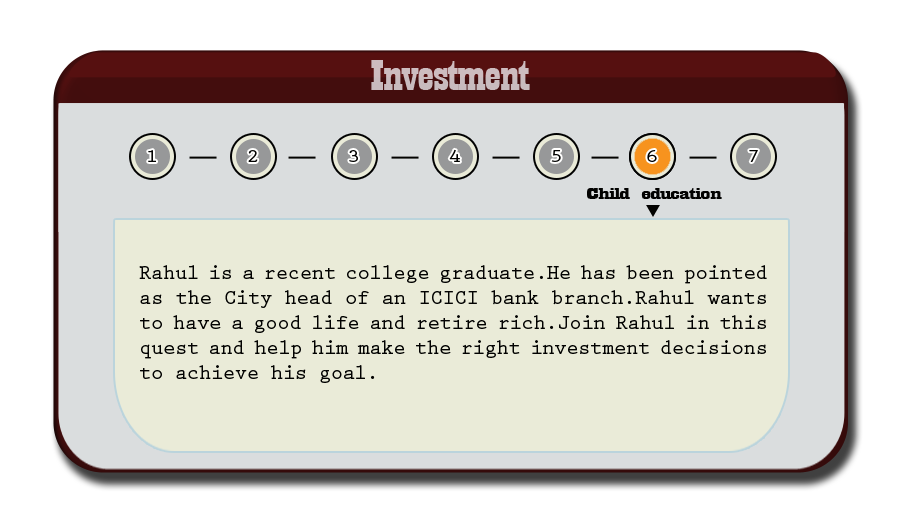
<style>
.page{position:relative;width:910px;height:512px;background:#eaebd8}
.page>*{position:absolute;margin:0}
.t1{font:44.6px "Playbill";letter-spacing:-0.025em;color:#c8bbbe;scale:1.61 1}
.t2{font:18.8px "PrestigeEliteStd-Bd";letter-spacing:-0.025em;color:#020201;scale:1.18 1}
.t3{font:17.3px "Playbill";letter-spacing:-0.025em;color:#020201;scale:2.47 1}
.t4{font:20.8px "PrestigeEliteStd-Bd";letter-spacing:-0.025em;color:#020201}
</style>
<div class="page">
<p class="t1" style="left:371px;top:60px;width:159px;height:30px">Investment</p>
<p class="t2" style="left:148px;top:150px;width:8px;height:12px">1</p>
<p class="t2" style="left:248px;top:150px;width:10px;height:12px">2</p>
<p class="t2" style="left:349px;top:150px;width:9px;height:12px">3</p>
<p class="t2" style="left:449px;top:149px;width:11px;height:13px">4</p>
<p class="t2" style="left:551px;top:150px;width:10px;height:12px">5</p>
<p class="t2" style="left:647px;top:150px;width:10px;height:12px">6</p>
<p class="t2" style="left:749px;top:150px;width:9px;height:12px">7</p>
<p class="t3" style="left:587px;top:188px;width:135px;height:11px">Child education</p>
<p class="t4" style="left:139px;top:265px;width:628px;height:118px;text-align:justify">Rahul is a recent college graduate.He has been pointed as the City head of an ICICI bank branch.Rahul wants to have a good life and retire rich.Join Rahul in this quest and help him make the right investment decisions to achieve his goal.</p>
</div>
